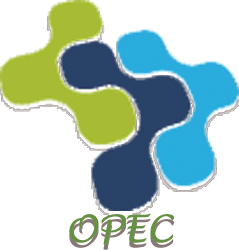
<style>
.page{position:relative;width:239px;height:250px;background:#ffffff}
.page>*{position:absolute;margin:0}
.t1{font:37.5px "LucidaHandwriting-Italic";color:#669044}
</style>
<div class="page">
<p class="t1" style="left:69px;top:213px;width:105px;height:32px">OPEC</p>
</div>
